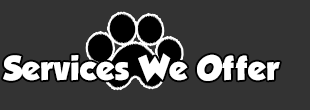
<style>
.page{position:relative;width:310px;height:110px;background:#333333}
.page>*{position:absolute;margin:0}
.t1{font:30px "GROBOLD";letter-spacing:0.02em;color:#ffffff}
</style>
<div class="page">
<p class="t1" style="left:3px;top:53px;width:277px;height:30px">Services We Offer</p>
</div>
